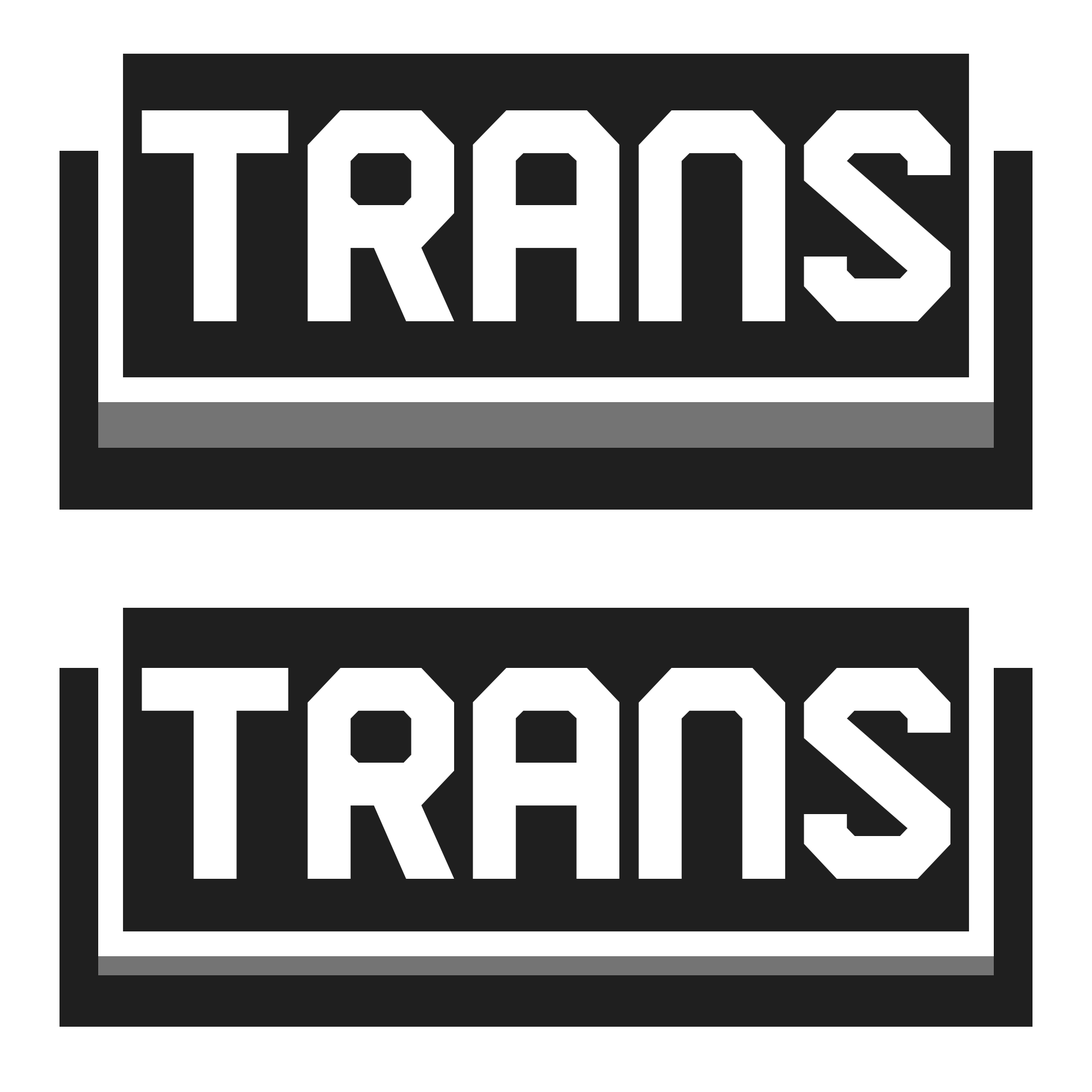
<style>
.page{position:relative;width:1092px;height:1092px;background:#ffffff}
.page>*{position:absolute;margin:0}
.t1{font:300.9px "SquareBlock-Regular";color:#ffffff}
</style>
<div class="page">
<p class="t1" style="left:142px;top:110px;width:808px;height:211px">TRANS</p>
<p class="t1" style="left:142px;top:668px;width:808px;height:211px">TRANS</p>
</div>
